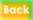
<style>
.page{position:relative;width:33px;height:20px}
.page>*{position:absolute;margin:0}
.t1{font:11.3px "CenturyGothic-Bold";color:#fef6f5;scale:0.93 1}
</style>
<div class="page">
<p class="t1" style="left:4px;top:5px;width:26px;height:9px">Back</p>
</div>
